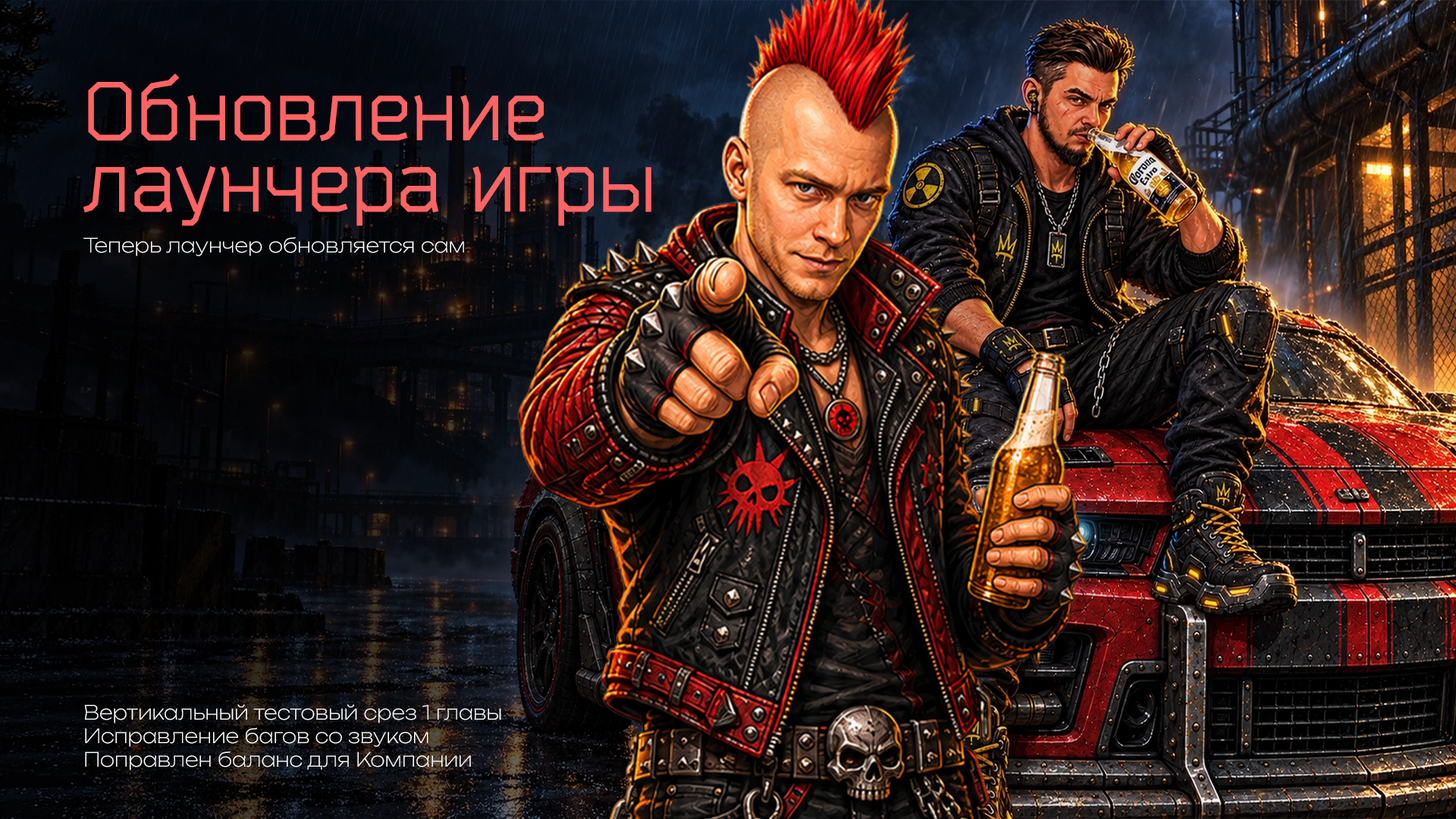
<style>
.page{position:relative;width:1456px;height:819px}
.page>*{position:absolute;margin:0}
.t1{font:83.4px/71.3px "Bender";color:#ff6464}
.t2{font:19.5px "Unbounded-ExtraLight";color:#ffffff}
</style>
<div class="page">
<p class="t1" style="left:83px;top:74px;width:568px;height:152px">Обновление<br>лаунчера игры</p>
<p class="t2" style="left:83px;top:237px;width:381px;height:19px">Теперь лаунчер обновляется сам</p>
<p class="t2" style="left:84px;top:704px;width:417px;height:66px">Вертикальный тестовый срез 1 главы<br>Исправление багов со звуком<br>Поправлен баланс для Компании</p>
</div>
